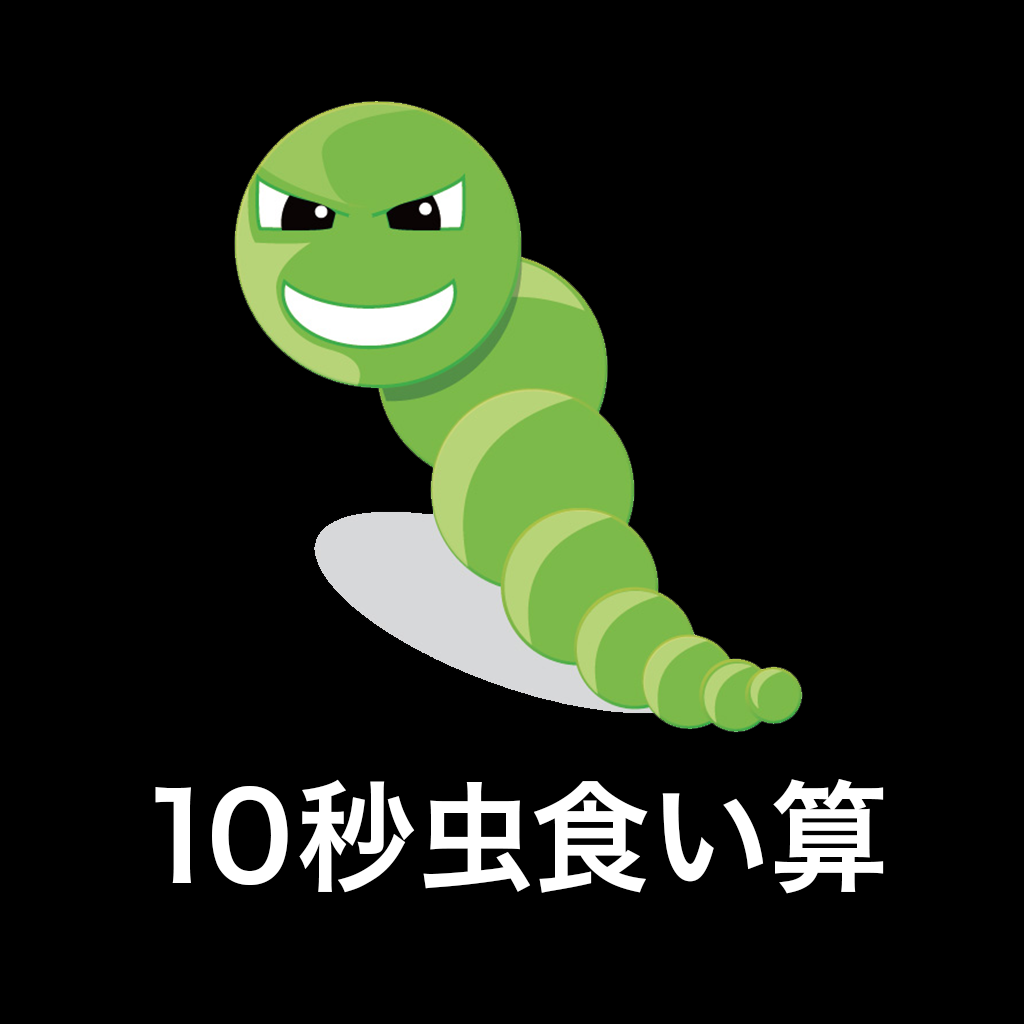
<style>
.page{position:relative;width:1024px;height:1024px;background:#000000}
.page>*{position:absolute;margin:0}
.t1{font:120px "HiraKakuProN-W6";letter-spacing:-0.01em;color:#ffffff}
</style>
<div class="page">
<p class="t1" style="left:155px;top:779px;width:729px;height:115px">10秒虫食い算</p>
</div>
